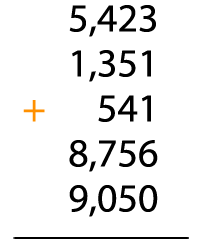
<style>
.page{position:relative;width:200px;height:250px;background:#ffffff}
.page>*{position:absolute;margin:0}
.t1{font:40px/45px "MyriadPro-Regular";color:#000000}
.t2{font:40px/45px "MyriadPro-Regular";color:#ff9000}
</style>
<div class="page">
<p class="t1" style="left:23px;top:5px;width:135px;height:212px;text-align:right">5,423<br>1,351<br><span class="t2">+</span>      541<br>8,756<br>9,050</p>
</div>
